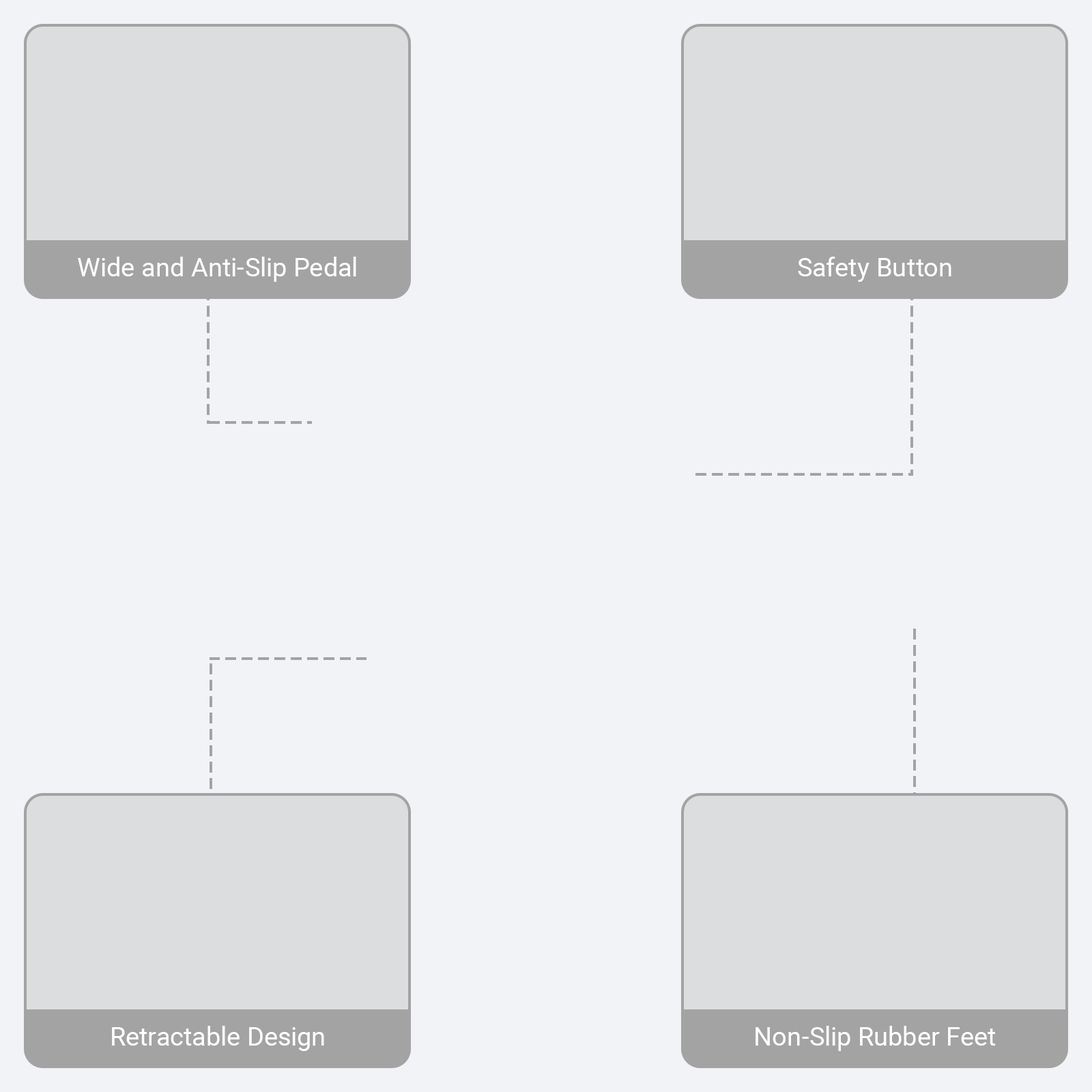
<style>
.page{position:relative;width:1092px;height:1092px;background:#f2f3f6}
.page>*{position:absolute;margin:0}
.t1{font:26.2px "Roboto-Regular";color:#ffffff}
</style>
<div class="page">
<p class="t1" style="left:78px;top:257px;width:278px;height:25px">Wide and Anti-Slip Pedal</p>
<p class="t1" style="left:798px;top:257px;width:153px;height:25px">Safety Button</p>
<p class="t1" style="left:112px;top:1026px;width:212px;height:25px">Retractable Design</p>
<p class="t1" style="left:756px;top:1026px;width:240px;height:25px">Non-Slip Rubber Feet</p>
</div>
